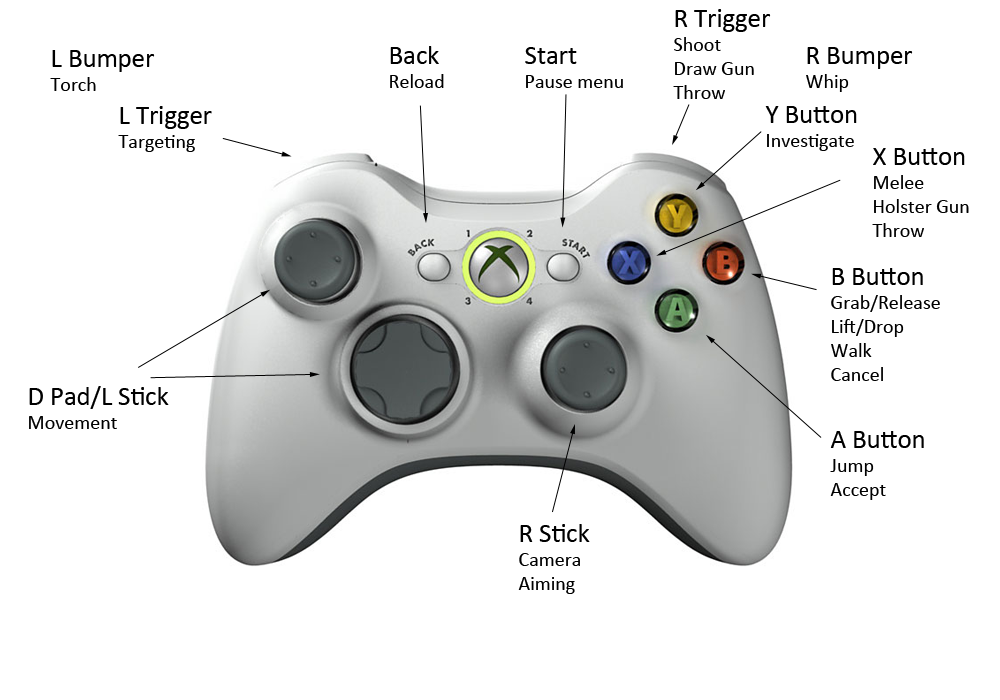
<style>
.page{position:relative;width:1000px;height:700px;background:#ffffff}
.page>*{position:absolute;margin:0}
.t1{font:20px "Calibri";color:#000000}
.t2{font:26.7px "Calibri";color:#000000}
</style>
<div class="page">
<p class="t1" style="left:673px;top:9px;width:98px;height:90px"><span class="t2">R Trigger<br></span>Shoot<br>Draw Gun<br>Throw</p>
<p class="t2" style="left:50px;top:50px;width:105px;height:41px">L Bumper<br><span class="t1">Torch</span></p>
<p class="t1" style="left:390px;top:46px;width:54px;height:42px"><span class="t2">Back<br></span>Reload</p>
<p class="t1" style="left:525px;top:47px;width:98px;height:41px"><span class="t2">Start<br></span>Pause menu</p>
<p class="t2" style="left:806px;top:47px;width:107px;height:45px">R Bumper<br><span class="t1">Whip</span></p>
<p class="t2" style="left:118px;top:106px;width:94px;height:46px">L Trigger<br><span class="t1">Targeting</span></p>
<p class="t1" style="left:765px;top:106px;width:92px;height:45px"><span class="t2">Y Button<br></span>Investigate</p>
<p class="t1" style="left:872px;top:148px;width:97px;height:89px"><span class="t2">X Button<br></span>Melee<br>Holster Gun<br>Throw</p>
<p class="t1" style="left:831px;top:268px;width:109px;height:113px"><span class="t2">B Button<br></span>Grab/Release<br>Lift/Drop<br>Walk<br>Cancel</p>
<p class="t2" style="left:29px;top:386px;width:140px;height:43px">D Pad/L Stick<br><span class="t1">Movement</span></p>
<p class="t1" style="left:830px;top:431px;width:94px;height:69px"><span class="t2">A Button<br></span>Jump<br>Accept</p>
<p class="t1" style="left:518px;top:524px;width:72px;height:70px"><span class="t2">R Stick<br></span>Camera<br>Aiming</p>
</div>
